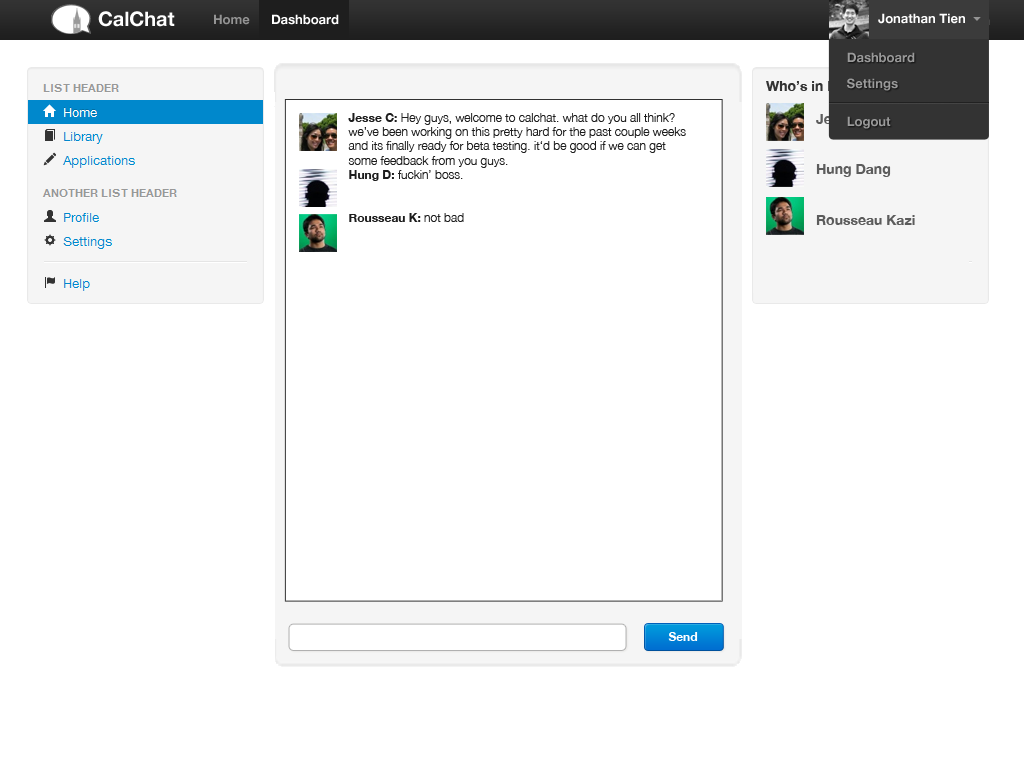
<style>
.page{position:relative;width:1024px;height:768px;background:#ffffff}
.page>*{position:absolute;margin:0}
.t1{font:20px "HelveticaNeue-Bold";color:#ffffff}
.t2{font:13px "HelveticaNeue-Bold";color:#949494}
.t3{font:13px "HelveticaNeue-Bold";color:#ffffff}
.t4{font:13px/18px "HelveticaNeue-Bold";color:#9a9a9a}
.t5{font:14px "HelveticaNeue-Bold";color:#333333}
.t6{font:12px "HelveticaNeue-Light";color:#1d1d1d}
.t7{font:12px "HelveticaNeue-Bold";color:#1d1d1d}
.t8{font:14px "HelveticaNeue-Bold";color:#5c5c5c}
.t9{font:12px "HelveticaNeue-Bold";color:#ffffff}
</style>
<div class="page">
<p class="t1" style="left:98px;top:11px;width:77px;height:16px">CalChat</p>
<p class="t2" style="left:214px;top:14px;width:36px;height:11px">Home</p>
<p class="t3" style="left:272px;top:14px;width:67px;height:11px">Dashboard</p>
<p class="t3" style="left:878px;top:13px;width:87px;height:11px">Jonathan Tien</p>
<p class="t4" style="left:847px;top:52px;width:68px;height:77px">Dashboard<br>Settings<br>Logout</p>
<p class="t5" style="left:766px;top:81px;width:93px;height:10px">Who’s in Here</p>
<p class="t6" style="left:348px;top:113px;width:338px;height:109px"><span class="t7">Jesse C: </span>Hey guys, welcome to calchat. what do you all think? we’ve been working on this pretty hard for the past couple weeks and its finally ready for beta testing. it‘d be good if we can get some feedback from you guys.<br><span class="t7">Hung D: </span>fuckin’ boss.<br><span class="t7"><br><br>Rousseau K: </span>not bad</p>
<p class="t8" style="left:816px;top:114px;width:99px;height:111px">Jesse Chen<br><br><br>Hung Dang<br><br><br>Rousseau Kazi</p>
<p class="t9" style="left:668px;top:632px;width:30px;height:9px">Send</p>
</div>
